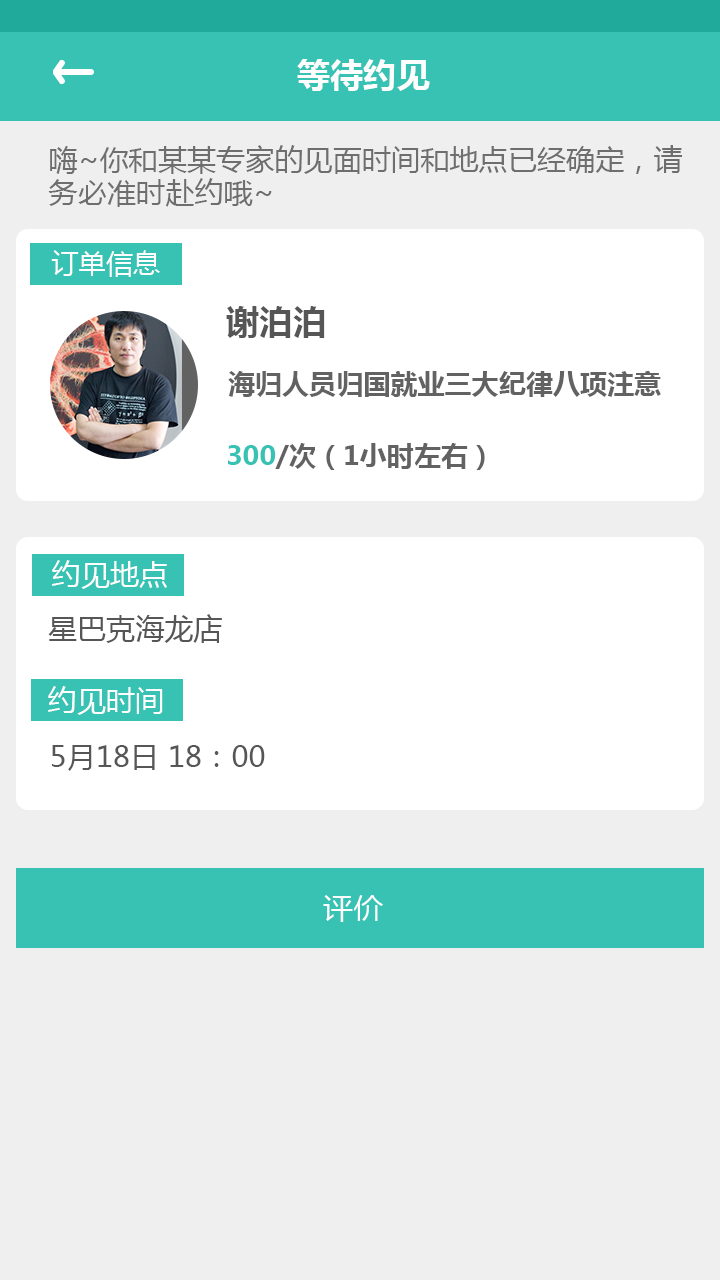
<style>
.page{position:relative;width:720px;height:1280px;background:#efefef}
.page>*{position:absolute;margin:0}
.t1{font:33.3px "MicrosoftYaHei-Bold";color:#fefefe}
.t2{font:29.2px/33.3px "MicrosoftYaHei";color:#6e6e6e}
.t3{font:27.1px "MicrosoftYaHei";color:#fefefe}
.t4{font:33.3px "MicrosoftYaHei-Bold";color:#565656}
.t5{font:27.1px "MicrosoftYaHei-Bold";color:#626262}
.t6{font:27.1px "MicrosoftYaHei-Bold";color:#38c2b3}
.t7{font:29.2px "MicrosoftYaHei";color:#fefefe}
.t8{font:29.2px "MicrosoftYaHei";color:#565656}
.t9{font:29.2px "MicrosoftYaHei";color:#fefefe;scale:1.04 1}
</style>
<div class="page">
<p class="t1" style="left:297px;top:59px;width:133px;height:32px">等待约见</p>
<p class="t2" style="left:48px;top:145px;width:634px;height:62px">嗨~你和某某专家的见面时间和地点已经确定，请<br>务必准时赴约哦~</p>
<p class="t3" style="left:51px;top:250px;width:109px;height:27px">订单信息</p>
<p class="t4" style="left:226px;top:306px;width:99px;height:32px">谢泊泊</p>
<p class="t5" style="left:228px;top:371px;width:433px;height:26px">海归人员归国就业三大纪律八项注意</p>
<p class="t5" style="left:228px;top:443px;width:257px;height:27px"><span class="t6">300</span>/次（1小时左右）</p>
<p class="t7" style="left:52px;top:560px;width:115px;height:29px">约见地点</p>
<p class="t8" style="left:48px;top:614px;width:174px;height:29px">星巴克海龙店</p>
<p class="t7" style="left:48px;top:686px;width:115px;height:29px">约见时间</p>
<p class="t8" style="left:52px;top:745px;width:213px;height:26px">5月18日 18：00</p>
<p class="t9" style="left:323px;top:895px;width:60px;height:27px">评价</p>
</div>
